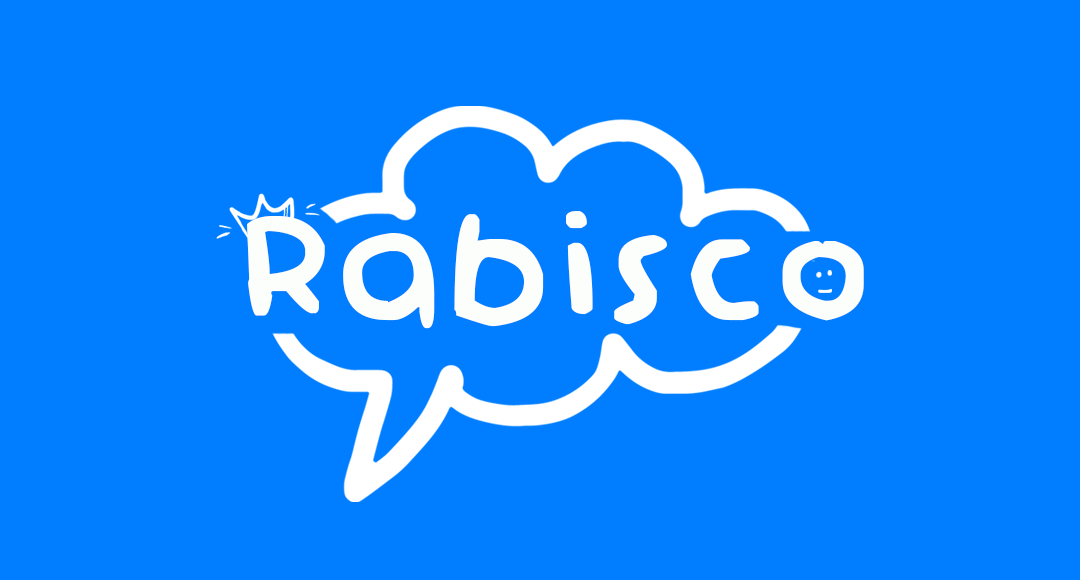
<style>
.page{position:relative;width:1080px;height:580px;background:#007eff}
.page>*{position:absolute;margin:0}
.t1{font:184.4px "Baby-Doll";color:#fcfefc}
</style>
<div class="page">
<p class="t1" style="left:247px;top:211px;width:617px;height:118px">Rabisco</p>
</div>
